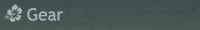
<style>
.page{position:relative;width:200px;height:30px}
.page>*{position:absolute;margin:0}
.t1{font:17px "TrebuchetMS";color:#abb0b3}
</style>
<div class="page">
<p class="t1" style="left:27px;top:8px;width:37px;height:13px">Gear</p>
</div>
